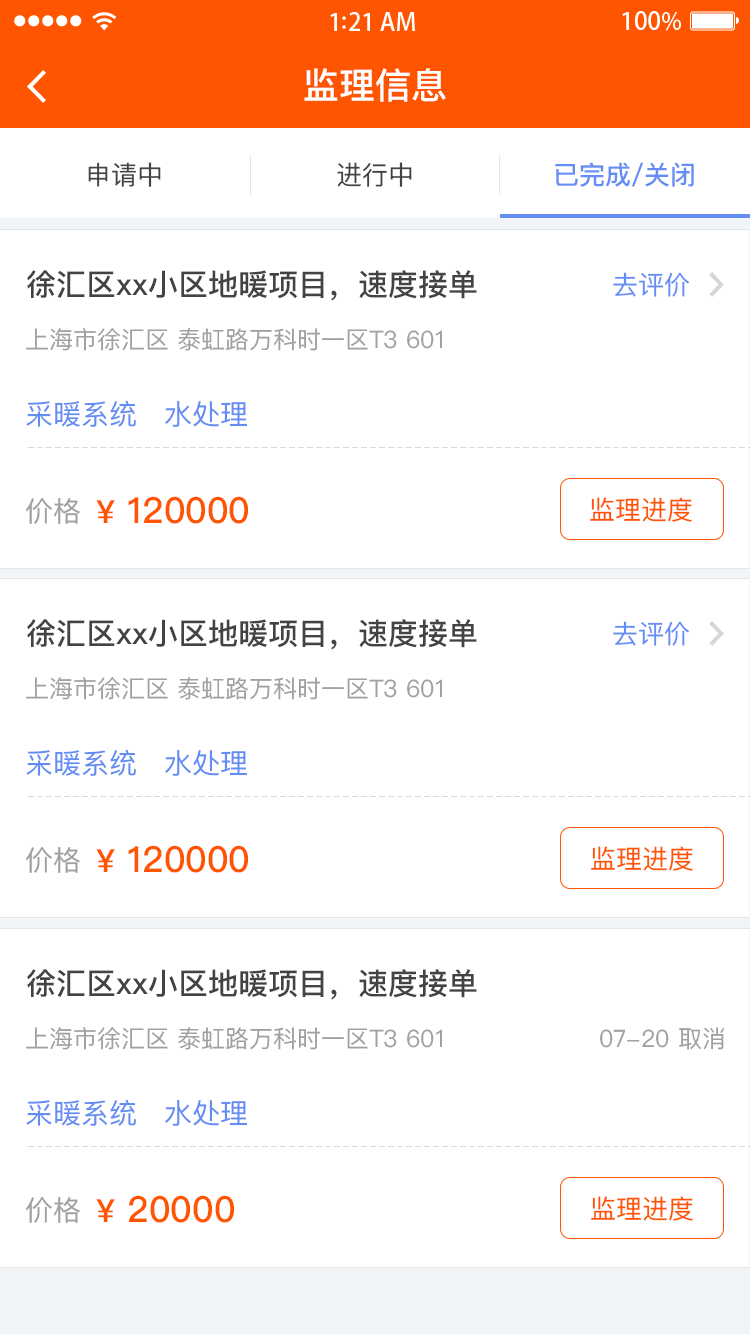
<style>
.page{position:relative;width:750px;height:1334px;background:#ffffff}
.page>*{position:absolute;margin:0}
.t1{font:36px "PingFangSC-Medium";color:#ffffff}
.t2{font:26px "PingFangSC-Regular";color:#434343}
.t3{font:26px "PingFangSC-Medium";color:#648df6}
.t4{font:30px "PingFangSC-Medium";color:#434343}
.t5{font:26px "PingFangSC-Regular";color:#648df6}
.t6{font:24px "PingFangSC-Regular";color:#a0a0a0}
.t7{font:28px "PingFangSC-Regular";color:#648df4}
.t8{font:36px "PingFangSC-Medium";color:#ff5400}
.t9{font:32px "PingFangSC-Medium";color:#ff5400}
.t10{font:26px "PingFangSC-Regular";color:#ff5400}
.t11{font:28px "PingFangSC-Regular";color:#a0a0a0}
</style>
<div class="page">
<p class="t1" style="left:304px;top:68px;width:142px;height:34px">监理信息</p>
<p class="t2" style="left:88px;top:162px;width:73px;height:25px">申请中</p>
<p class="t2" style="left:337px;top:162px;width:75px;height:25px">进行中</p>
<p class="t3" style="left:555px;top:162px;width:139px;height:25px">已完成/关闭</p>
<p class="t4" style="left:27px;top:270px;width:450px;height:31px">徐汇区xx小区地暖项目，速度接单</p>
<p class="t5" style="left:613px;top:272px;width:76px;height:25px">去评价</p>
<p class="t6" style="left:26px;top:328px;width:416px;height:23px">上海市徐汇区 泰虹路万科时一区T3 601</p>
<p class="t7" style="left:26px;top:400px;width:110px;height:27px">采暖系统</p>
<p class="t7" style="left:165px;top:400px;width:82px;height:27px">水处理</p>
<p class="t8" style="left:96px;top:496px;width:152px;height:28px"><span class="t9">¥</span> 120000</p>
<p class="t10" style="left:590px;top:497px;width:102px;height:25px">监理进度</p>
<p class="t11" style="left:26px;top:498px;width:54px;height:26px">价格</p>
<p class="t4" style="left:27px;top:619px;width:450px;height:31px">徐汇区xx小区地暖项目，速度接单</p>
<p class="t5" style="left:613px;top:621px;width:76px;height:25px">去评价</p>
<p class="t6" style="left:26px;top:677px;width:416px;height:23px">上海市徐汇区 泰虹路万科时一区T3 601</p>
<p class="t7" style="left:26px;top:749px;width:110px;height:27px">采暖系统</p>
<p class="t7" style="left:165px;top:749px;width:82px;height:27px">水处理</p>
<p class="t8" style="left:96px;top:845px;width:152px;height:28px"><span class="t9">¥</span> 120000</p>
<p class="t10" style="left:591px;top:846px;width:102px;height:25px">监理进度</p>
<p class="t11" style="left:26px;top:847px;width:54px;height:26px">价格</p>
<p class="t4" style="left:27px;top:969px;width:450px;height:31px">徐汇区xx小区地暖项目，速度接单</p>
<p class="t6" style="left:26px;top:1027px;width:416px;height:23px">上海市徐汇区 泰虹路万科时一区T3 601</p>
<p class="t6" style="left:600px;top:1027px;width:125px;height:23px">07-20 取消</p>
<p class="t7" style="left:26px;top:1099px;width:110px;height:27px">采暖系统</p>
<p class="t7" style="left:165px;top:1099px;width:82px;height:27px">水处理</p>
<p class="t11" style="left:26px;top:1197px;width:54px;height:26px">价格</p>
<p class="t8" style="left:96px;top:1195px;width:138px;height:28px"><span class="t9">¥</span> 20000</p>
<p class="t10" style="left:591px;top:1196px;width:102px;height:25px">监理进度</p>
</div>
